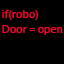
<style>
.page{position:relative;width:64px;height:64px;background:#000000}
.page>*{position:absolute;margin:0}
.t1{font:12px "Corbel";color:#ff002a}
</style>
<div class="page">
<p class="t1" style="left:2px;top:10px;width:61px;height:25px">if(robo)<br>Door = open</p>
</div>
